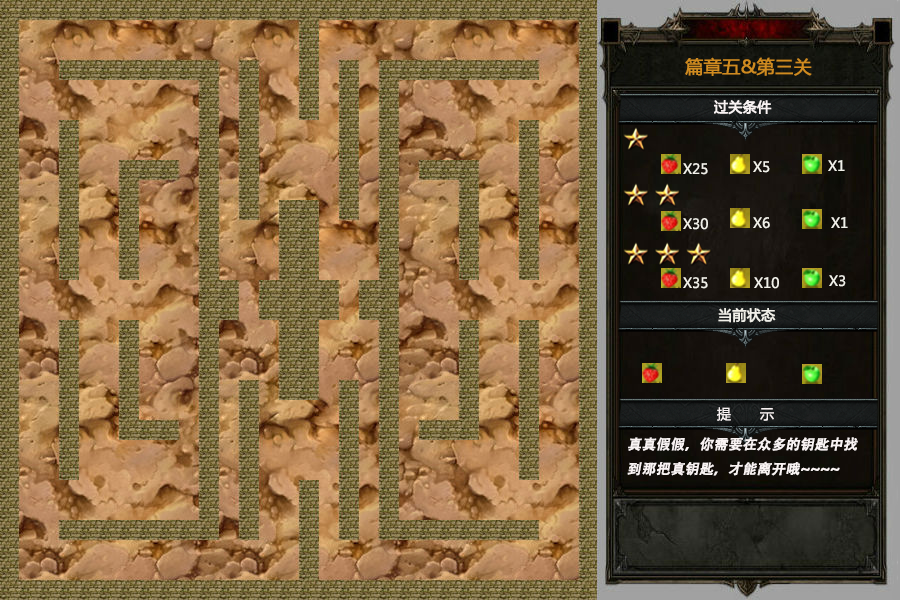
<style>
.page{position:relative;width:900px;height:600px}
.page>*{position:absolute;margin:0}
.t1{font:18px "MicrosoftYaHei";color:#cf8b20;font-weight:bold}
.t2{font:14px "MicrosoftYaHei";color:#f9f3f3;font-weight:bold}
.t3{font:14px "MicrosoftYaHei";color:#f1f0e9}
.t4{font:14px "MicrosoftYaHei";color:#f1f0e9;font-weight:bold}
.t5{font:14px "MicrosoftYaHei";color:#f9f3f3}
.t6{font:14px "AdobeHeitiStd-Regular";color:#f9f3f3;font-weight:bold;font-style:italic}
</style>
<div class="page">
<p class="t1" style="left:685px;top:57px;width:127px;height:19px">篇章五&amp;第三关</p>
<p class="t2" style="left:714px;top:100px;width:58px;height:15px">过关条件</p>
<p class="t3" style="left:753px;top:161px;width:17px;height:12px">X5</p>
<p class="t3" style="left:828px;top:160px;width:17px;height:11px">X1</p>
<p class="t3" style="left:683px;top:163px;width:25px;height:12px">X25</p>
<p class="t3" style="left:683px;top:218px;width:25px;height:12px">X30</p>
<p class="t3" style="left:753px;top:217px;width:17px;height:12px">X6</p>
<p class="t3" style="left:831px;top:217px;width:17px;height:11px">X1</p>
<p class="t3" style="left:683px;top:277px;width:25px;height:12px">X35</p>
<p class="t3" style="left:754px;top:277px;width:25px;height:12px">X10</p>
<p class="t3" style="left:829px;top:275px;width:17px;height:12px">X3</p>
<p class="t4" style="left:718px;top:308px;width:58px;height:15px">当前状态</p>
<p class="t5" style="left:717px;top:407px;width:57px;height:14px">提       示</p>
<p class="t6" style="left:627px;top:437px;width:231px;height:39px">真真假假，你需要在众多的钥匙中找到那把真钥匙，才能离开哦~~~~</p>
</div>
